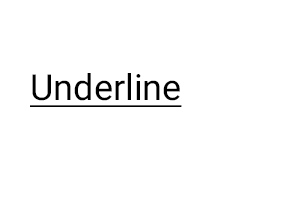
<style>
.page{position:relative;width:300px;height:200px;background:#ffffff}
.page>*{position:absolute;margin:0}
.t1{font:36px "Roboto-Regular";color:#000000;text-decoration:underline}
</style>
<div class="page">
<p class="t1" style="left:30px;top:73px;width:152px;height:34px">Underline</p>
</div>
